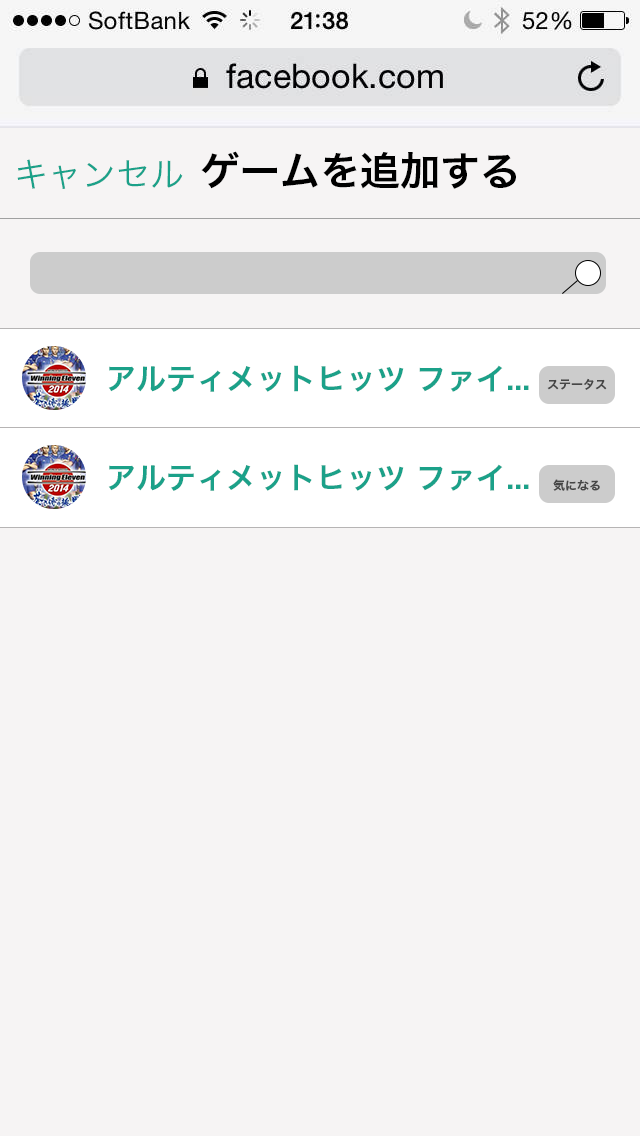
<style>
.page{position:relative;width:640px;height:1136px;background:#f6f4f4}
.page>*{position:absolute;margin:0}
.t1{font:34px "HiraKakuPro-W3";color:#1ba189}
.t2{font:40px "HiraKakuPro-W6";color:#000000}
.t3{font:30px "HiraKakuPro-W6";color:#1ba189}
.t4{font:12px "HiraKakuPro-W6";color:#464646}
</style>
<div class="page">
<p class="t1" style="left:17px;top:159px;width:166px;height:30px">キャンセル</p>
<p class="t2" style="left:201px;top:151px;width:315px;height:38px">ゲームを追加する</p>
<p class="t3" style="left:108px;top:365px;width:421px;height:27px">アルティメットヒッツ ファイ...</p>
<p class="t4" style="left:547px;top:378px;width:60px;height:12px">ステータス</p>
<p class="t3" style="left:108px;top:464px;width:421px;height:27px">アルティメットヒッツ ファイ...</p>
<p class="t4" style="left:553px;top:479px;width:47px;height:12px">気になる</p>
</div>
